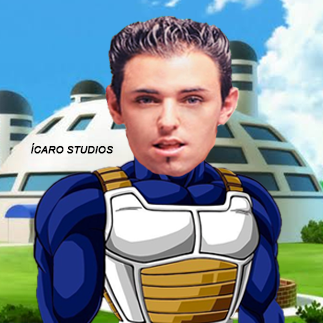
<style>
.page{position:relative;width:323px;height:323px}
.page>*{position:absolute;margin:0}
.t1{font:10px "Arial-ItalicMT";color:#000000;font-weight:bold}
</style>
<div class="page">
<p class="t1" style="left:31px;top:143px;width:82px;height:11px">ÍCARO STUDIOS</p>
</div>
